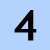
<style>
.page{position:relative;width:50px;height:50px;background:#b4d2fe}
.page>*{position:absolute;margin:0}
.t1{font:41.7px "TrebuchetMS";color:#000000;font-weight:bold}
</style>
<div class="page">
<p class="t1" style="left:14px;top:10px;width:23px;height:31px">4</p>
</div>
